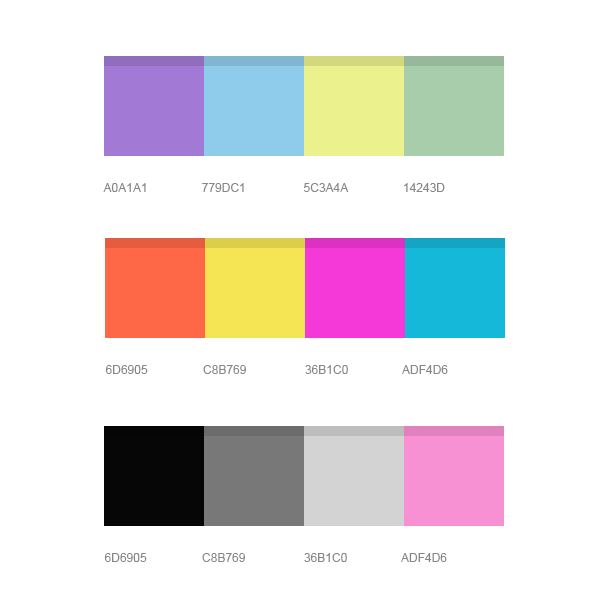
<style>
.page{position:relative;width:600px;height:600px;background:#ffffff}
.page>*{position:absolute;margin:0}
.t1{font:12px "ArialMT";color:#878787;text-transform:uppercase}
</style>
<div class="page">
<p class="t1" style="left:103px;top:183px;width:43px;height:9px">a0a1a1</p>
<p class="t1" style="left:202px;top:183px;width:42px;height:9px">779dc1</p>
<p class="t1" style="left:303px;top:183px;width:46px;height:9px">5c3a4a</p>
<p class="t1" style="left:404px;top:183px;width:41px;height:9px">14243d</p>
<p class="t1" style="left:105px;top:365px;width:43px;height:9px">6d6905</p>
<p class="t1" style="left:203px;top:365px;width:43px;height:9px">c8b769</p>
<p class="t1" style="left:305px;top:365px;width:43px;height:9px">36b1c0</p>
<p class="t1" style="left:402px;top:365px;width:46px;height:9px">adf4d6</p>
<p class="t1" style="left:104px;top:553px;width:43px;height:9px">6d6905</p>
<p class="t1" style="left:202px;top:553px;width:43px;height:9px">c8b769</p>
<p class="t1" style="left:304px;top:553px;width:43px;height:9px">36b1c0</p>
<p class="t1" style="left:401px;top:553px;width:46px;height:9px">adf4d6</p>
</div>
